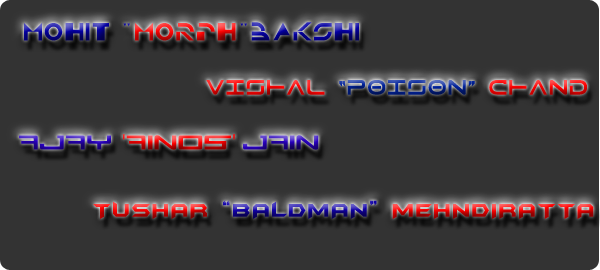
<style>
.page{position:relative;width:600px;height:270px;background:#333333}
.page>*{position:absolute;margin:0}
.t1{font:18px "TRON";letter-spacing:0.05em}
.t2{font:22px "Tele-MarinesBold";letter-spacing:0.05em}
.t3{font:22px "Tele-Marines";letter-spacing:0.05em}
.t4{font:22px "N-Gage";letter-spacing:0.05em}
.t5{font:22px "MyriadPro-Regular";letter-spacing:0.05em}
.t6{font:22px "BatmanForeverAlternate";letter-spacing:0.05em}
</style>
<div class="page">
<p class="t1" style="left:24px;top:22px;width:335px;height:19px">MOhIT "MORPH"BAKSHI</p>
<p class="t2" style="left:206px;top:80px;width:381px;height:15px"><span class="t3">       </span>VISHAL “POISON” CHAND</p>
<p class="t4" style="left:19px;top:134px;width:300px;height:16px">AJAY <span class="t5">'</span>AINOS<span class="t5">' </span>JAIN</p>
<p class="t6" style="left:93px;top:200px;width:501px;height:19px">TUSHAR “BALDMAN” MEHNDIRATTA</p>
</div>
